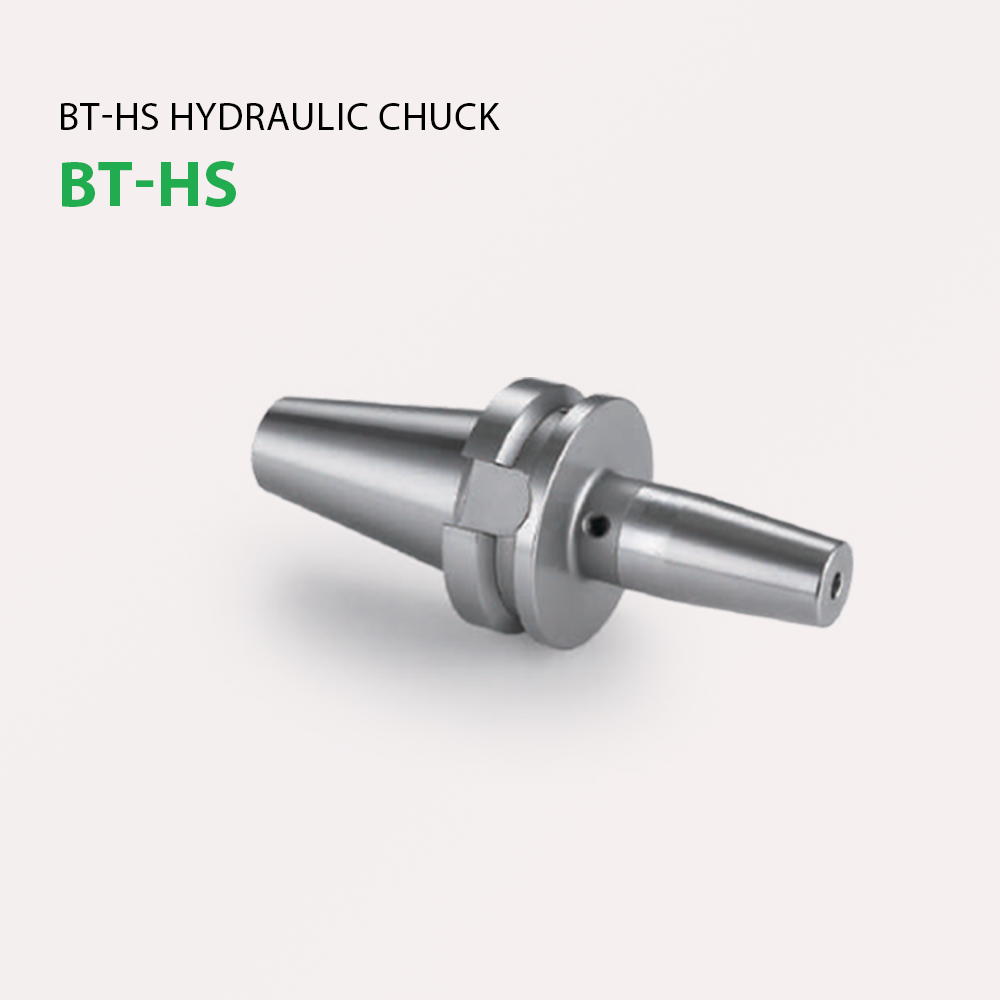
<style>
.page{position:relative;width:1000px;height:1000px;background:#f5efef}
.page>*{position:absolute;margin:0}
.t1{font:39.5px "MyriadPro-Regular";color:#000000;text-transform:uppercase}
.t2{font:65.4px "MyriadPro-Bold";color:#21ad4f;text-transform:uppercase}
</style>
<div class="page">
<p class="t1" style="left:61px;top:103px;width:439px;height:27px">BT-HS Hydraulic Chuck</p>
<p class="t2" style="left:62px;top:161px;width:174px;height:46px">bt-hs</p>
</div>
